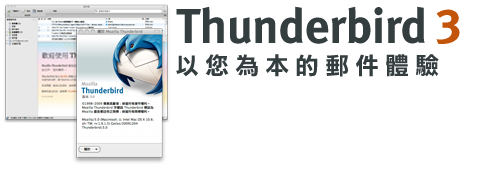
<style>
.page{position:relative;width:500px;height:180px;background:#ffffff}
.page>*{position:absolute;margin:0}
.t1{font:49px "MetaBold-Roman";letter-spacing:-0.01em;color:#343e40}
.t2{font:49px "MetaBold-Roman";letter-spacing:-0.01em;color:#c2550a}
.t3{font:24px "DFLiHeiStd-W7";letter-spacing:0.25em;color:#343e40}
</style>
<div class="page">
<p class="t1" style="left:176px;top:6px;width:249px;height:38px">Thunderbird</p>
<p class="t2" style="left:436px;top:9px;width:24px;height:35px">3</p>
<p class="t3" style="left:176px;top:54px;width:263px;height:23px">以您為本的郵件體驗</p>
</div>
